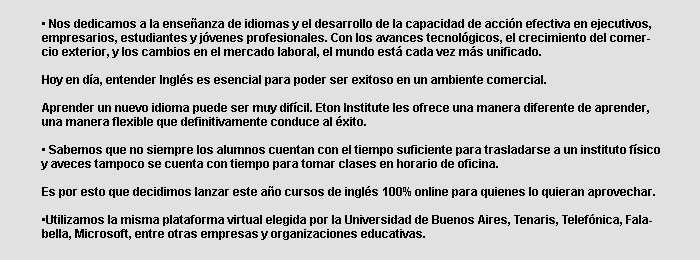
<style>
.page{position:relative;width:700px;height:260px;background:#e1e1e1}
.page>*{position:absolute;margin:0}
.t1{font:11.7px "Arial-BoldMT";color:#000000}
</style>
<div class="page">
<p class="t1" style="left:41px;top:18px;width:619px;height:222px">• Nos dedicamos a la enseñanza de idiomas y el desarrollo de la capacidad de acción efectiva en ejecutivos, empresarios, estudiantes y jóvenes profesionales. Con los avances tecnológicos, el crecimiento del comercio exterior, y los cambios en el mercado laboral, el mundo está cada vez más unificado.<br><br>Hoy en día, entender Inglés es esencial para poder ser exitoso en un ambiente comercial.<br><br>Aprender un nuevo idioma puede ser muy difícil. Eton Institute les ofrece una manera diferente de aprender, una manera flexible que definitivamente conduce al éxito.<br><br>• Sabemos que no siempre los alumnos cuentan con el tiempo suficiente para trasladarse a un instituto físico y aveces tampoco se cuenta con tiempo para tomar clases en horario de oficina.<br><br>Es por esto que decidimos lanzar este año cursos de inglés 100% online para quienes lo quieran aprovechar.<br><br>•Utilizamos la misma plataforma virtual elegida por la Universidad de Buenos Aires, Tenaris, Telefónica, Falabella, Microsoft, entre otras empresas y organizaciones educativas.</p>
</div>
